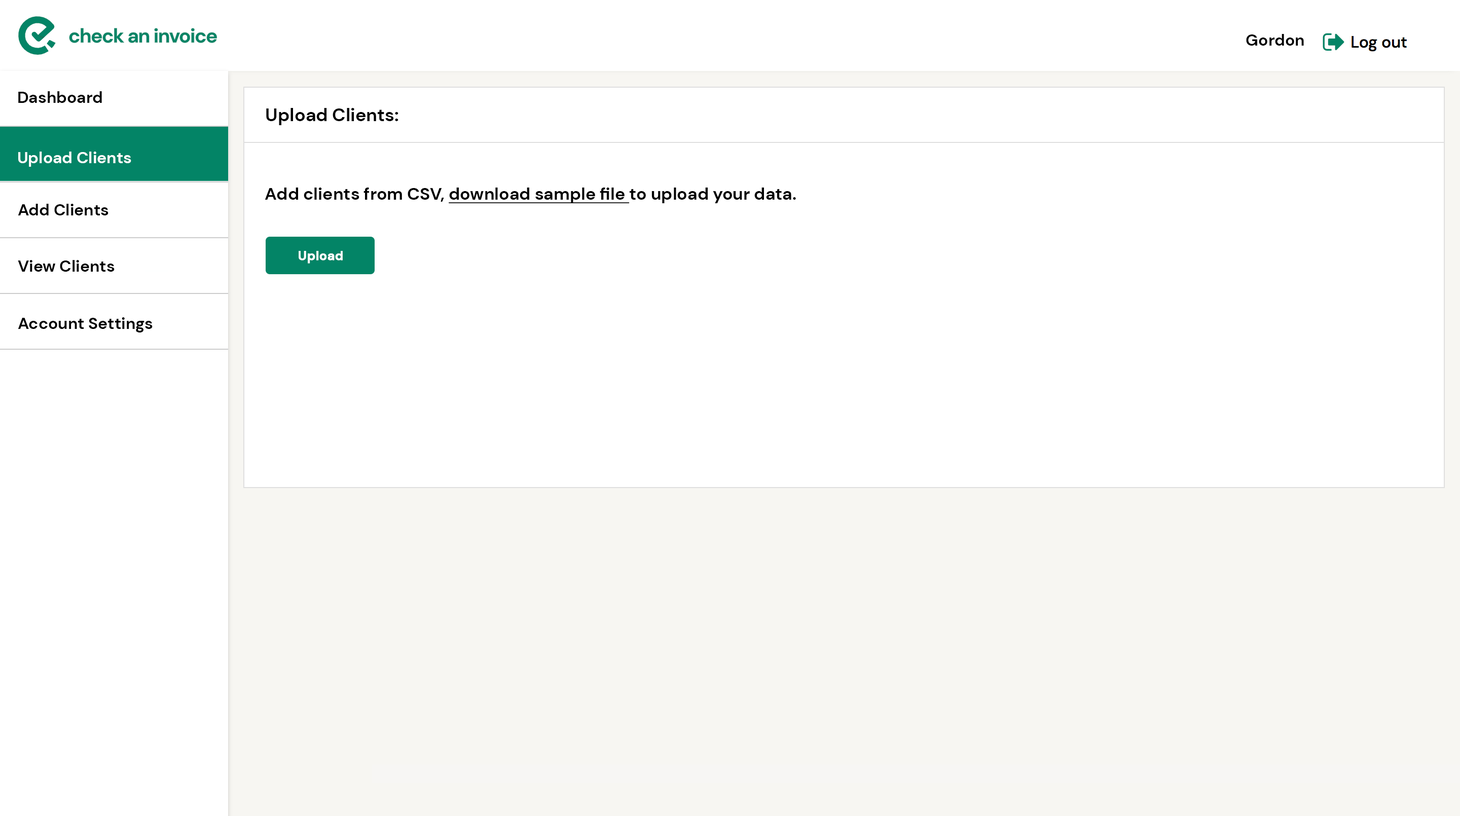
<style>
.page{position:relative;width:1460px;height:816px;background:#ffffff}
.page>*{position:absolute;margin:0}
.t1{font:16.2px "DMSans-Bold";color:#000000}
.t2{font:18.3px "DMSans-Bold";color:#010101}
.t3{font:16.2px "DMSans-Bold";color:#ffffff}
.t4{font:17.2px "DMSans-Bold";color:#000000}
.t5{font:17.2px "DMSans-Bold";color:#000000;text-decoration:underline}
.t6{font:12.7px "DMSans-Bold";color:#ffffff;font-weight:bold}
</style>
<div class="page">
<p class="t1" style="left:1246px;top:34px;width:58px;height:12px">Gordon</p>
<p class="t1" style="left:18px;top:91px;width:84px;height:12px">Dashboard</p>
<p class="t2" style="left:266px;top:108px;width:133px;height:17px">Upload Clients:</p>
<p class="t3" style="left:18px;top:152px;width:113px;height:15px">Upload Clients</p>
<p class="t4" style="left:265px;top:188px;width:531px;height:15px">Add clients from CSV, <span class="t5">download sample file </span>to upload your data.</p>
<p class="t1" style="left:18px;top:204px;width:91px;height:12px">Add Clients</p>
<p class="t6" style="left:299px;top:251px;width:44px;height:13px">Upload</p>
<p class="t1" style="left:18px;top:260px;width:97px;height:12px">View Clients</p>
<p class="t1" style="left:18px;top:317px;width:135px;height:16px">Account Settings</p>
</div>
